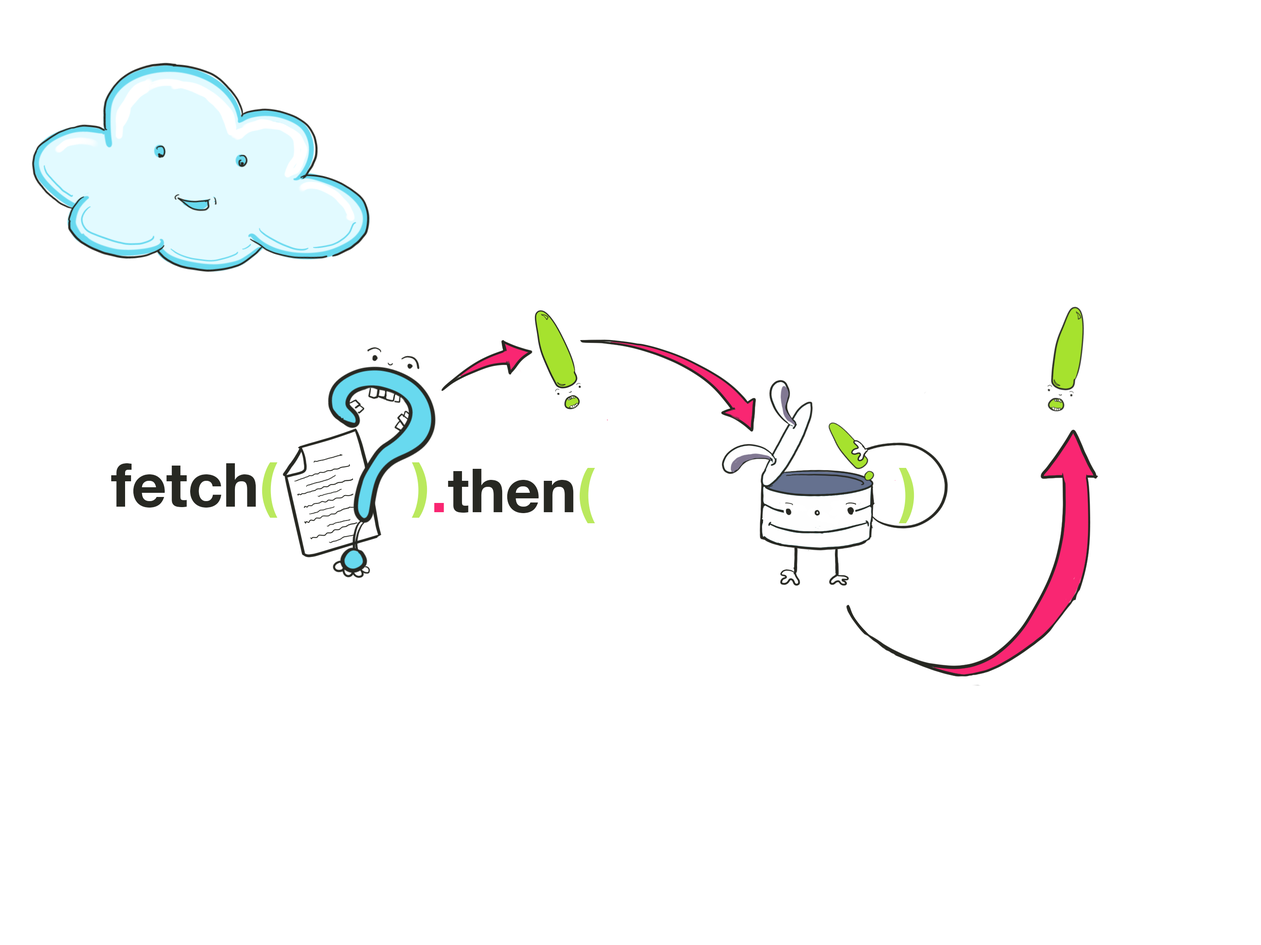
<style>
.page{position:relative;width:1261px;height:945px;background:#ffffff}
.page>*{position:absolute;margin:0}
.t1{font:60.9px "HelveticaNeue-Bold";color:#bae95d}
.t2{font:60.9px "HelveticaNeue-Bold";color:#272822}
.t3{font:60.9px "HelveticaNeue-Bold";color:#f92672}
</style>
<div class="page">
<p class="t1" style="left:111px;top:463px;width:316px;height:55px"><span class="t2">fetch</span>(        )</p>
<p class="t1" style="left:434px;top:468px;width:481px;height:56px"><span class="t3">.</span><span class="t2">then</span>(                  )</p>
</div>
